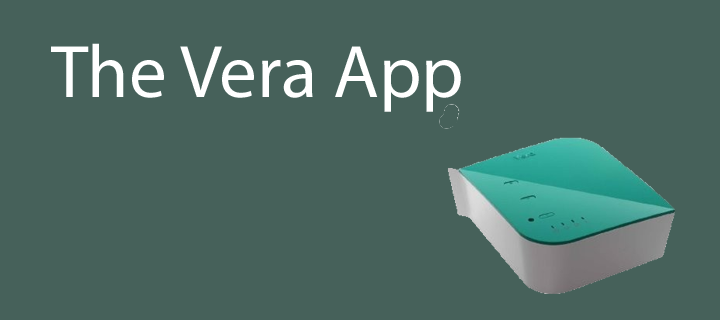
<style>
.page{position:relative;width:720px;height:320px;background:#46615a}
.page>*{position:absolute;margin:0}
.t1{font:75px "MyriadPro-Regular";color:#ffffff}
</style>
<div class="page">
<p class="t1" style="left:51px;top:43px;width:410px;height:69px">The Vera App</p>
</div>
